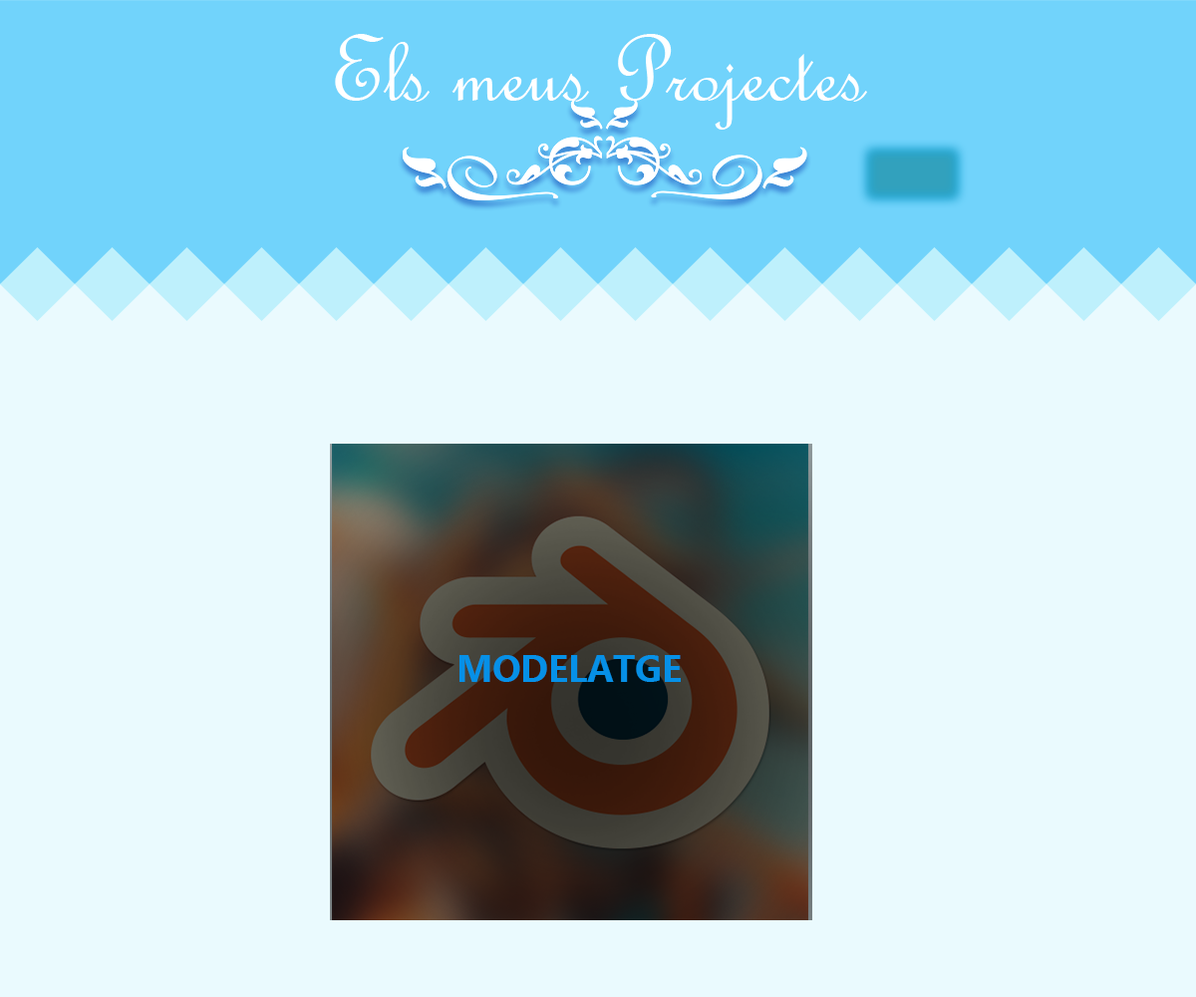
<style>
.page{position:relative;width:1196px;height:997px;background:#eafafe}
.page>*{position:absolute;margin:0}
.t1{font:99.7px "FrenchScriptMT";color:#ffffff}
.t2{font:37.4px "Ebrima-Bold";color:#0690e7}
</style>
<div class="page">
<p class="t1" style="left:335px;top:34px;width:532px;height:96px">Els meus Projectes</p>
<p class="t2" style="left:460px;top:655px;width:221px;height:27px">MODELATGE</p>
</div>
